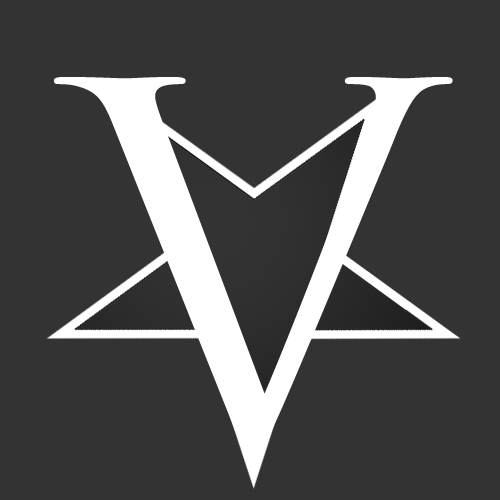
<style>
.page{position:relative;width:500px;height:500px;background:#333333}
.page>*{position:absolute;margin:0}
.t1{font:500px "TrajanPro-Regular";letter-spacing:0.1em;color:#ffffff;text-transform:uppercase}
</style>
<div class="page">
<p class="t1" style="left:54px;top:77px;width:399px;height:385px">V</p>
</div>
